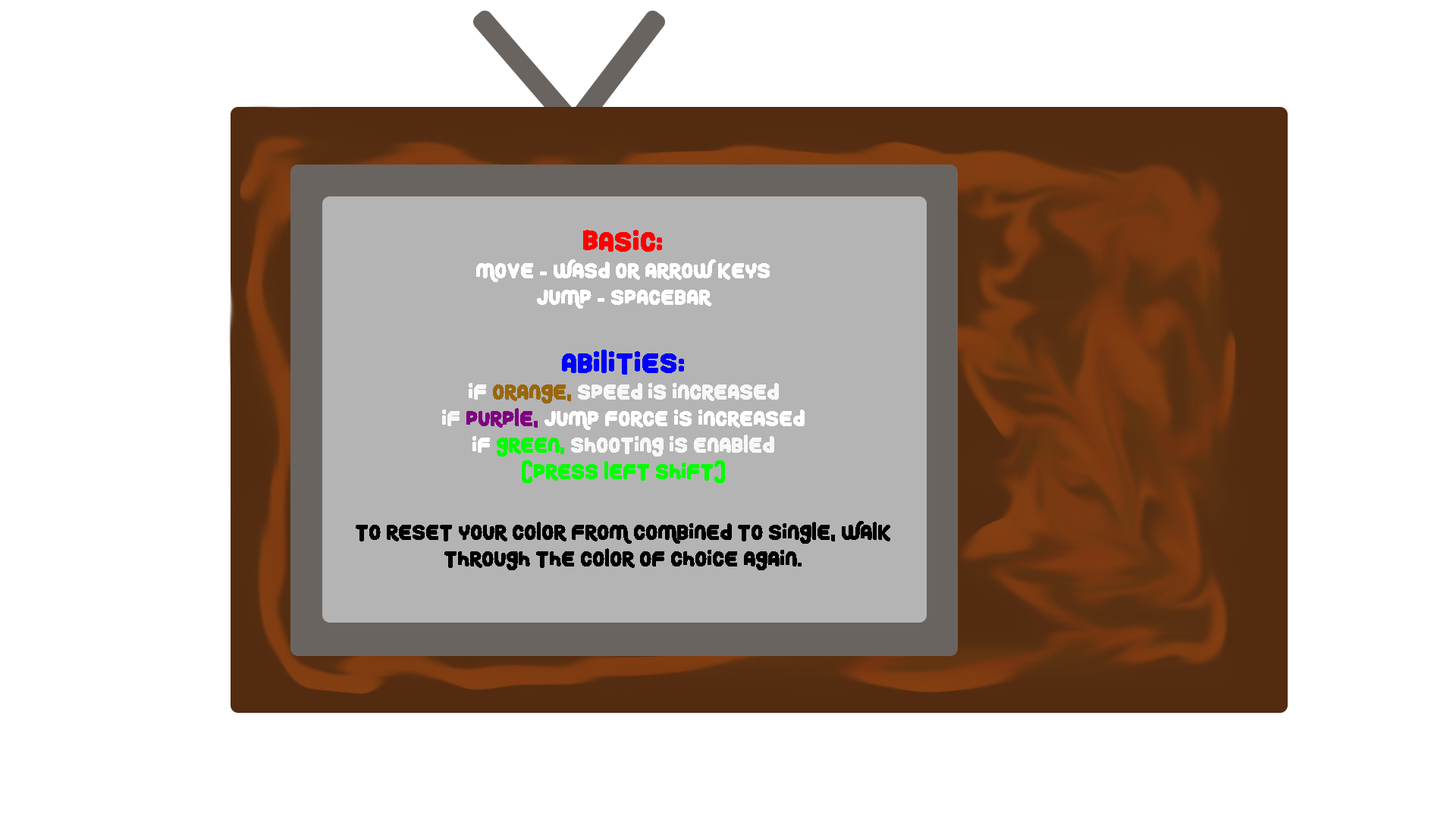
<style>
.page{position:relative;width:1456px;height:819px;background:#ffffff}
.page>*{position:absolute;margin:0}
.t1{font:22.1px "RoundyRainbows";color:#000000}
.t2{font:28.4px "RoundyRainbows";color:#ffffff}
.t3{font:28.4px "RoundyRainbows";color:#ff0000}
.t4{font:22.1px "RoundyRainbows";color:#ffffff}
.t5{font:28.4px "RoundyRainbows";color:#0000ff}
.t6{font:22.1px "RoundyRainbows";color:#f9f9f9}
.t7{font:22.1px "RoundyRainbows";color:#98670e}
.t8{font:22.1px "RoundyRainbows";color:#f7f7f7}
.t9{font:22.1px "RoundyRainbows";color:#800080}
.t10{font:22.1px "RoundyRainbows";color:#00ff00}
</style>
<div class="page">
<p class="t1" style="left:356px;top:230px;width:534px;height:340px;text-align:center"><span class="t2"><br></span><span class="t3">Basic:<br></span><span class="t4">Move - WASD or Arrow Keys<br>Jump - Spacebar<br><br></span><span class="t5">Abilities:<br></span><span class="t6">If </span><span class="t7">orange, </span><span class="t8">Speed is increased<br>if </span><span class="t9">purple, </span><span class="t4">jump force is increased<br>if </span><span class="t10">green, </span><span class="t8">shooting is enabled <br></span><span class="t10">(press Left shift)<br><br></span>To reset your color from combined to single, walk through the color of choice again.</p>
</div>
